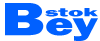
<style>
.page{position:relative;width:100px;height:41px;background:#ffffff}
.page>*{position:absolute;margin:0}
.t1{font:34.3px "FranklinGothic-Heavy";color:#0060ff;scale:1.42 1}
.t2{font:48.2px "FranklinGothic-Heavy";color:#0060ff;scale:1.42 1}
.t3{font:12.3px "FranklinGothic-Heavy";color:#0060ff;scale:2.07 1}
</style>
<div class="page">
<p class="t1" style="left:5px;top:3px;width:93px;height:38px"><span class="t2">B</span>ey</p>
<p class="t3" style="left:45px;top:8px;width:53px;height:9px">stok</p>
</div>
